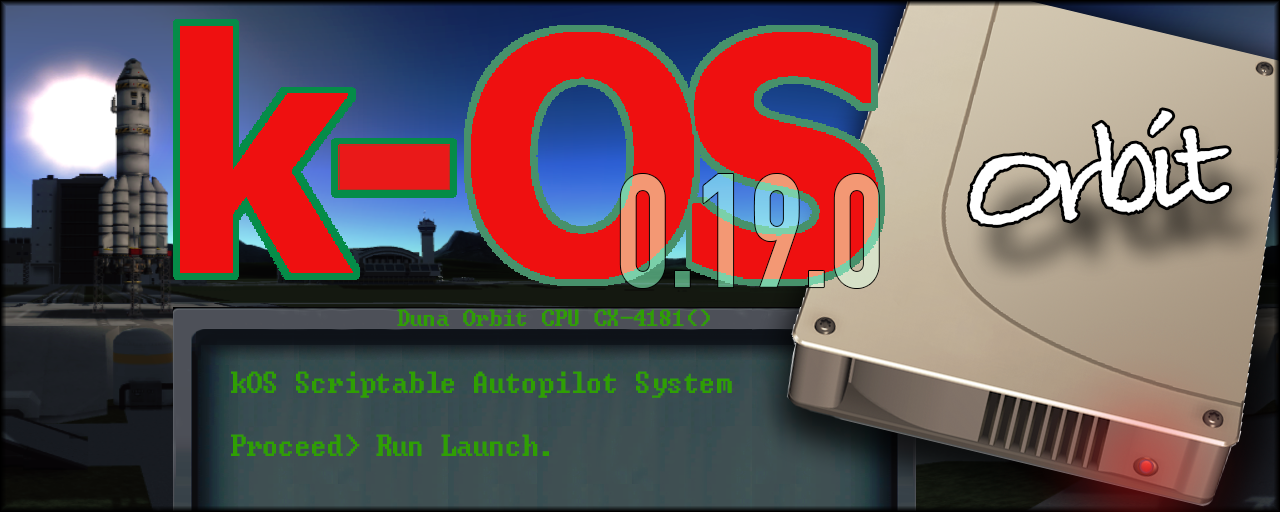
<style>
.page{position:relative;width:1280px;height:512px}
.page>*{position:absolute;margin:0}
.t1{font:130.7px "BradleyHandITCTT-Bold";letter-spacing:-0.1em;color:#ffffff;scale:1.1 1}
.t2{font:158.4px "DINCondensed-Bold";scale:0.91 1}
.t3{font:22.1px "GreenScreen";letter-spacing:-0.025em;color:#2f9f03;scale:0.93 1}
.t4{font:28.8px "GreenScreen";letter-spacing:-0.025em;color:#2f9f03;scale:0.88 1}
</style>
<div class="page">
<p class="t1" style="left:969px;top:110px;width:261px;height:115px;rotate:-6deg">Orbit</p>
<p class="t2" style="left:620px;top:174px;width:259px;height:114px">0.19.0</p>
<p class="t3" style="left:397px;top:309px;width:313px;height:17px">Duna Orbit CPU CX-4181()</p>
<p class="t4" style="left:231px;top:371px;width:501px;height:85px">kOS Scriptable Autopilot System<br><br>Proceed&gt; Run Launch.</p>
</div>
